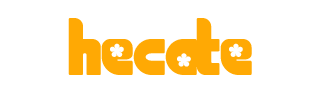
<style>
.page{position:relative;width:320px;height:100px;background:#ffffff}
.page>*{position:absolute;margin:0}
.t1{font:72px "Chick";color:#ffa904}
</style>
<div class="page">
<p class="t1" style="left:68px;top:18px;width:184px;height:57px">hecate</p>
</div>
